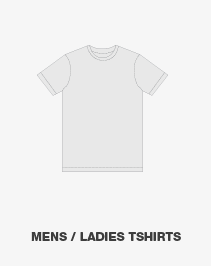
<style>
.page{position:relative;width:212px;height:266px;background:#f6f6f6}
.page>*{position:absolute;margin:0}
.t1{font:12px "HelveticaNeueLTStd-Hv";color:#3d3d3d}
</style>
<div class="page">
<p class="t1" style="left:31px;top:232px;width:150px;height:9px">MENS / LADIES TSHIRTS</p>
</div>
